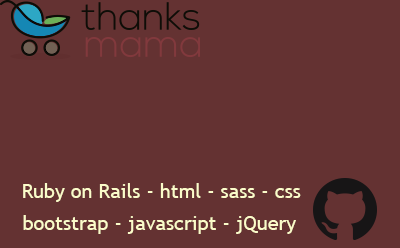
<style>
.page{position:relative;width:400px;height:248px;background:#643232}
.page>*{position:absolute;margin:0}
.t1{font:20px "TrebuchetMS";color:#fbfcca}
</style>
<div class="page">
<p class="t1" style="left:23px;top:183px;width:278px;height:19px">Ruby on Rails - html - sass - css</p>
<p class="t1" style="left:23px;top:215px;width:273px;height:19px">bootstrap - javascript - jQuery</p>
</div>
